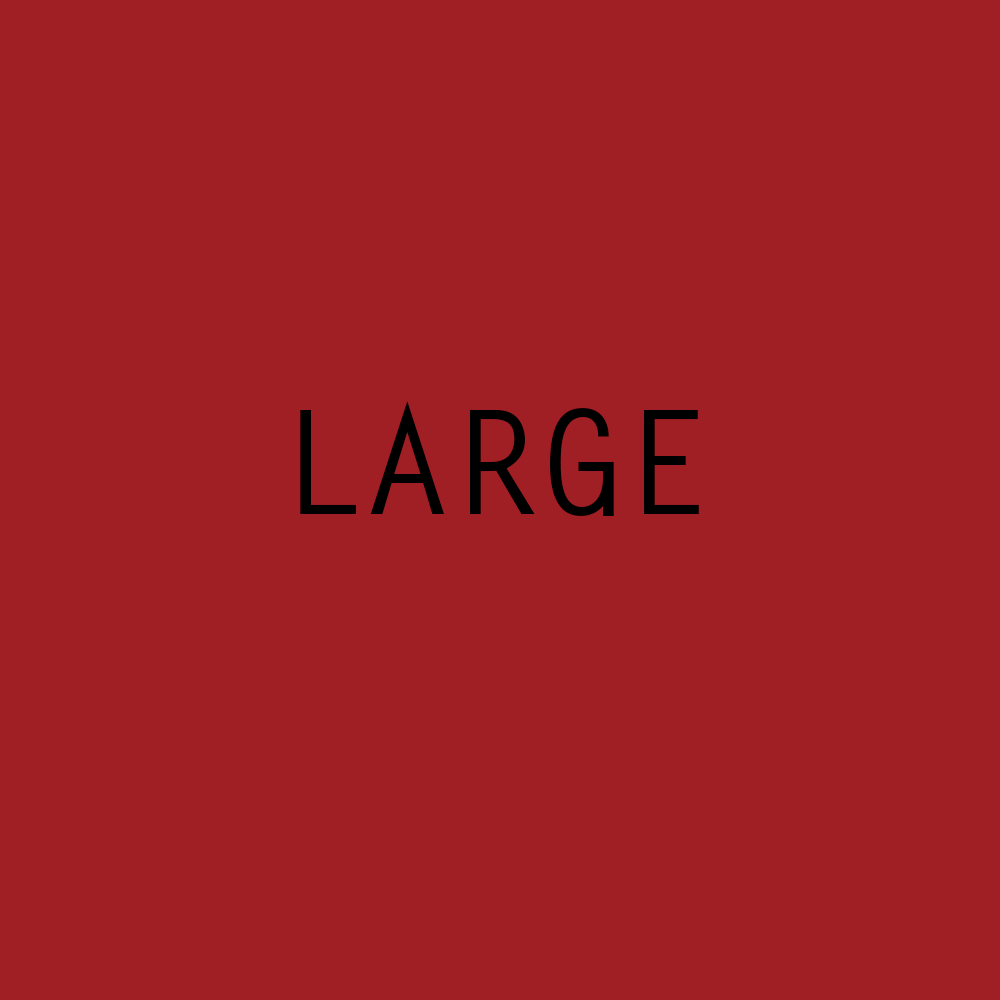
<style>
.page{position:relative;width:1000px;height:1000px;background:#9f1f25}
.page>*{position:absolute;margin:0}
.t1{font:144px "LetterGothicStd-Bold";color:#000000}
</style>
<div class="page">
<p class="t1" style="left:300px;top:401px;width:399px;height:115px">LARGE</p>
</div>
